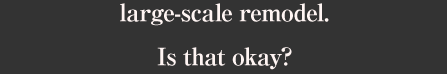
<style>
.page{position:relative;width:447px;height:74px;background:#333333}
.page>*{position:absolute;margin:0}
.t1{font:24px/44px "RyuminPro-ExBold";letter-spacing:-0.04em;color:#fff5f3}
</style>
<div class="page">
<p class="t1" style="left:120px;top:3px;width:209px;height:67px;text-align:center">large-scale remodel.<br>Is that okay?</p>
</div>
